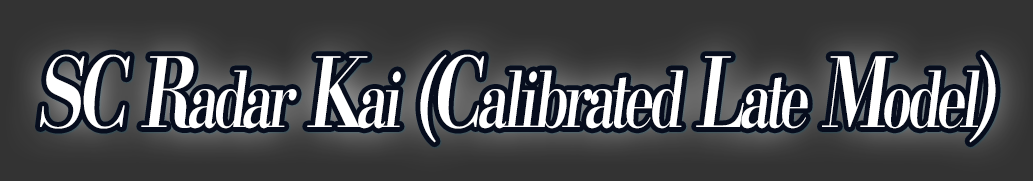
<style>
.page{position:relative;width:1033px;height:181px;background:#333333}
.page>*{position:absolute;margin:0}
.t1{font:76.8px "KochoStd-Heavy";letter-spacing:-0.08em;color:#ffffff;font-style:italic;scale:0.72 1}
.t2{font:96px "KochoStd-Heavy";letter-spacing:-0.08em;color:#ffffff;font-style:italic;scale:0.72 1}
</style>
<div class="page">
<p class="t1" style="left:40px;top:54px;width:956px;height:89px"><span class="t2">SC R</span>adar<span class="t2"> K</span>ai<span class="t2"> (C</span>alibrated<span class="t2"> L</span>ate<span class="t2"> M</span>odel<span class="t2">)</span></p>
</div>
